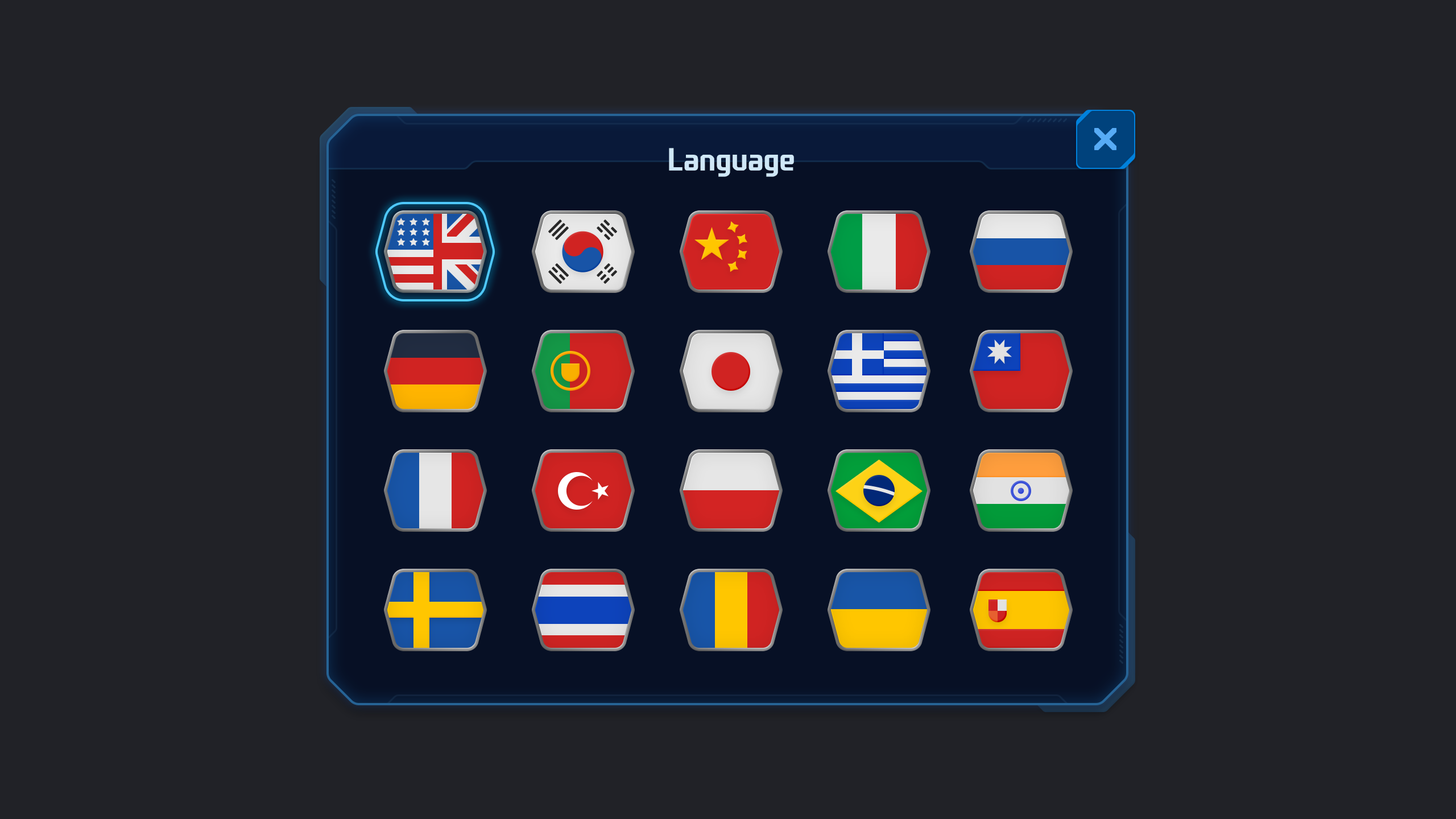
<style>
.page{position:relative;width:1456px;height:819px;background:#212227}
.page>*{position:absolute;margin:0}
.t1{font:30.7px "NEXONFootballGothicB";color:#cfe7f7}
</style>
<div class="page">
<p class="t1" style="left:669px;top:148px;width:125px;height:29px">Language</p>
</div>
